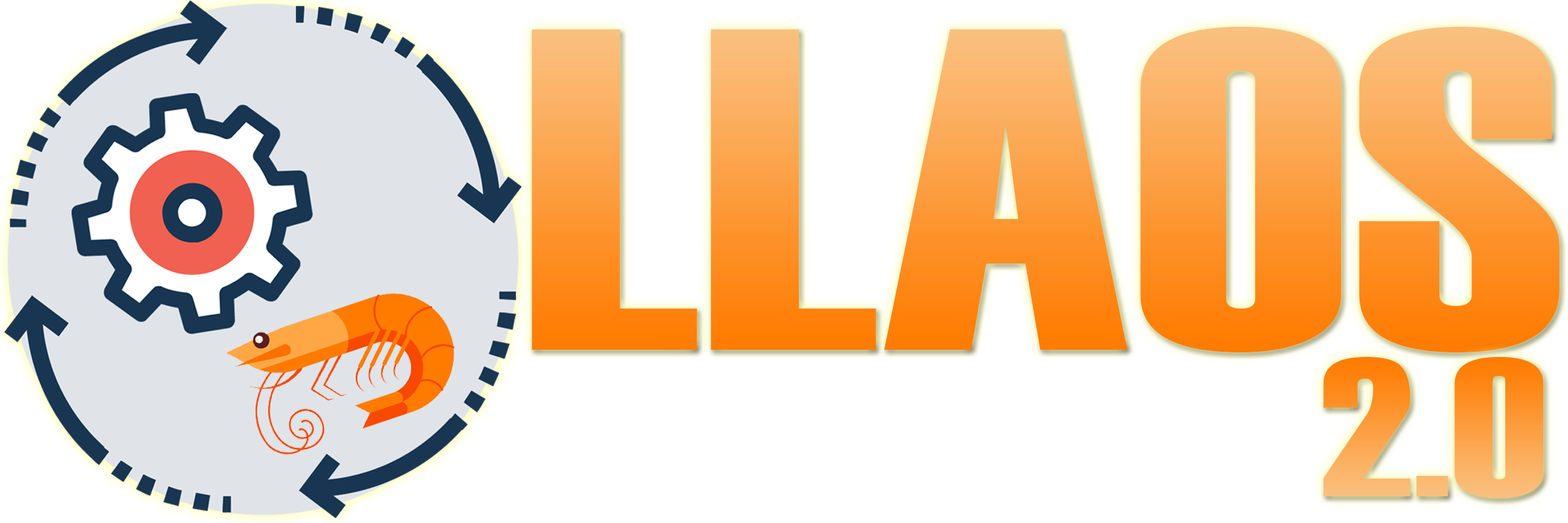
<style>
.page{position:relative;width:1568px;height:523px;background:#ffffff}
.page>*{position:absolute;margin:0}
.t1{font:457.3px "Haettenschweiler";scale:1.25 1}
.t2{font:197.6px "Haettenschweiler";scale:1.25 1}
</style>
<div class="page">
<p class="t1" style="left:532px;top:27px;width:1028px;height:325px">LLAOS</p>
<p class="t2" style="left:1323px;top:357px;width:221px;height:141px">2.0</p>
</div>
